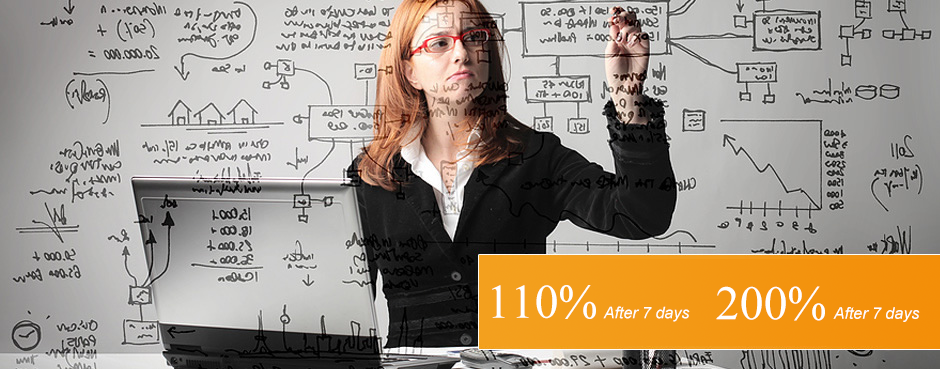
<style>
.page{position:relative;width:940px;height:369px}
.page>*{position:absolute;margin:0}
.t1{font:48px "TimesNewRomanPSMT";color:#ffffff}
.t2{font:16px "Arial-ItalicMT";color:#ffffff}
</style>
<div class="page">
<p class="t1" style="left:492px;top:285px;width:104px;height:34px">110%</p>
<p class="t1" style="left:716px;top:286px;width:109px;height:35px">200%</p>
<p class="t2" style="left:603px;top:306px;width:87px;height:16px">After 7 days</p>
<p class="t2" style="left:833px;top:307px;width:87px;height:15px">After 7 days</p>
</div>
